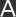
<style>
.page{position:relative;width:16px;height:17px;background:#333333}
.page>*{position:absolute;margin:0}
.t1{font:24px "ABeeZee-Regular";color:#f8f8f8}
</style>
<div class="page">
<p class="t1" style="left:0px;top:0px;width:16px;height:17px">A</p>
</div>
